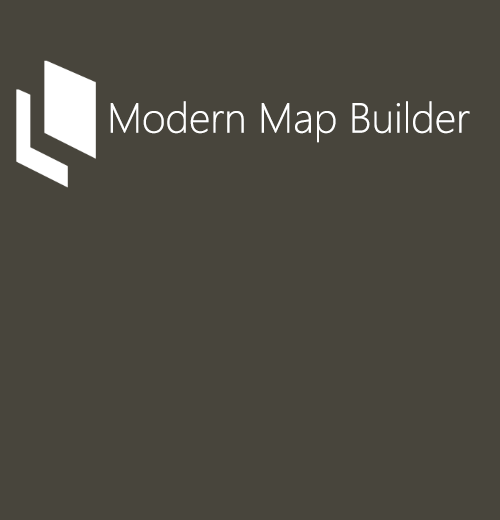
<style>
.page{position:relative;width:500px;height:520px;background:#48453c}
.page>*{position:absolute;margin:0}
.t1{font:42px "SegoeUI-Light";color:#ffffff}
</style>
<div class="page">
<p class="t1" style="left:110px;top:101px;width:360px;height:42px">Modern Map Builder</p>
</div>
